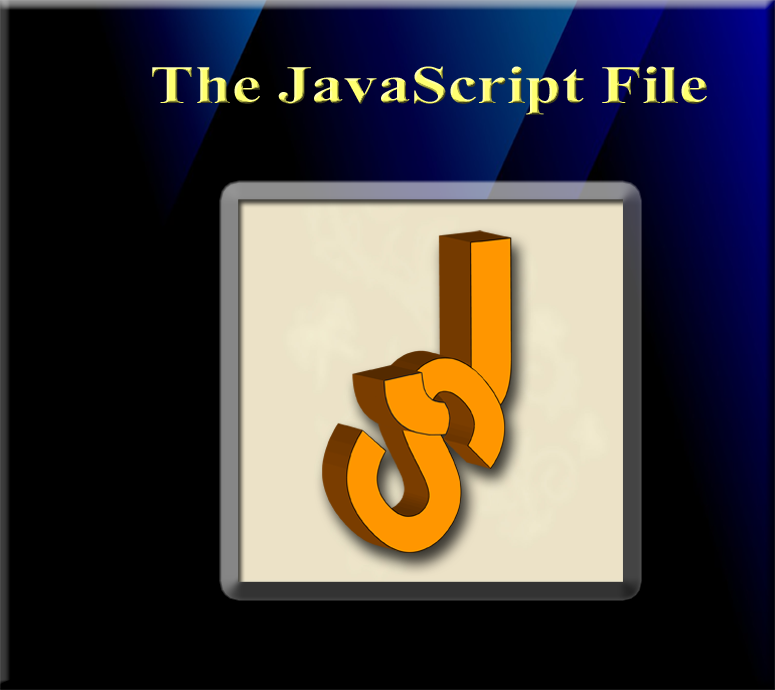
<style>
.page{position:relative;width:775px;height:690px;background:#000000}
.page>*{position:absolute;margin:0}
.t1{font:54px "TimesNewRomanPS-BoldMT";scale:1.23 1}
</style>
<div class="page">
<p class="t1" style="left:152px;top:66px;width:555px;height:49px">The JavaScript File</p>
</div>
